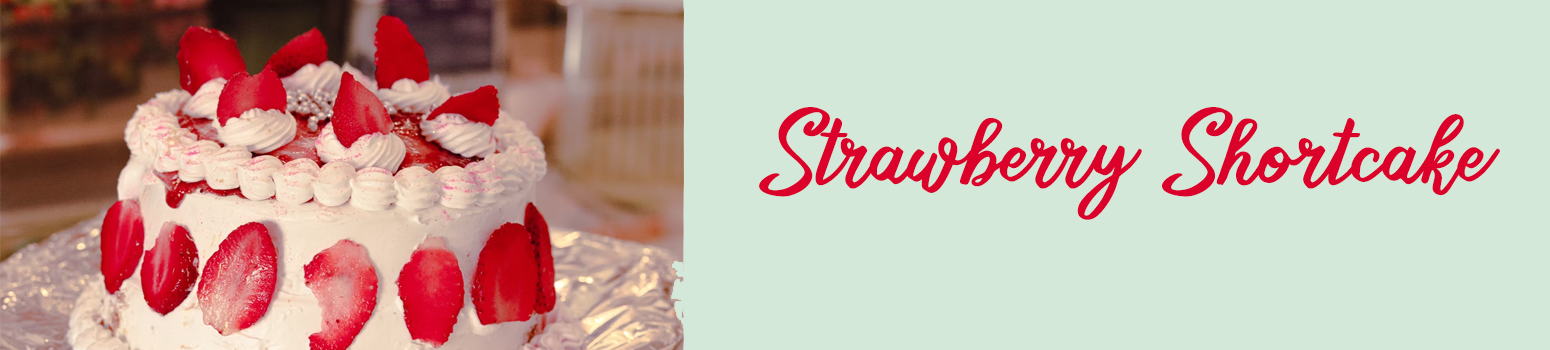
<style>
.page{position:relative;width:1550px;height:350px;background:#d3e8d8}
.page>*{position:absolute;margin:0}
.t1{font:94.7px "SweetsDelightDEMO";letter-spacing:-0.02em;color:#db012b;font-weight:bold}
</style>
<div class="page">
<p class="t1" style="left:759px;top:107px;width:741px;height:113px">Strawberry Shortcake</p>
</div>
